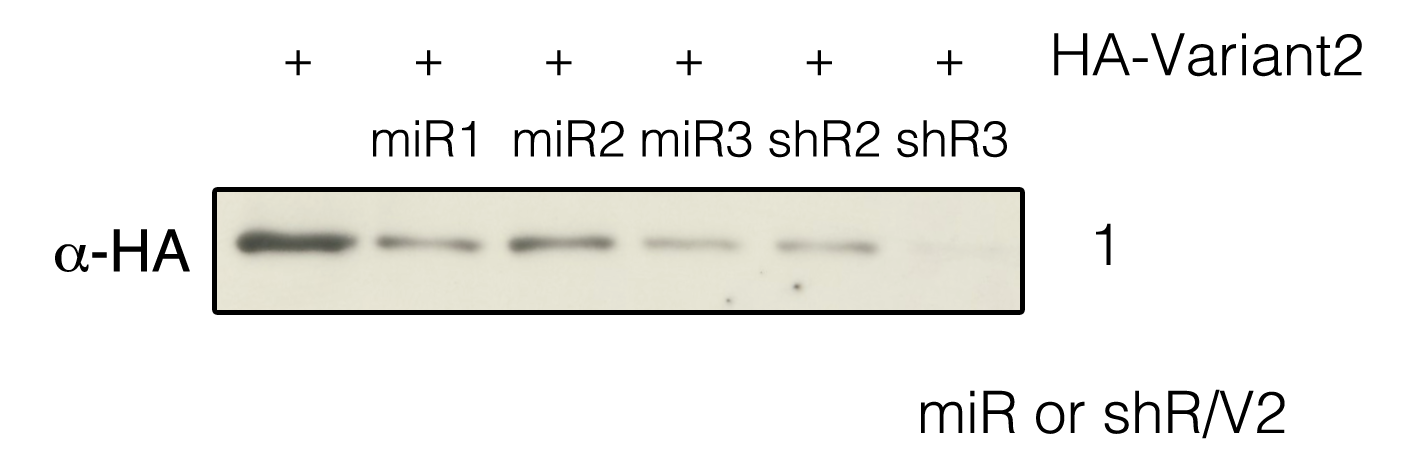
<style>
.page{position:relative;width:1417px;height:472px;background:#ffffff}
.page>*{position:absolute;margin:0}
.t1{font:50px "Helvetica-Light";color:#000000}
.t2{font:58.3px "Helvetica-Light";color:#000000}
.t3{font:58.3px "Helvetica";color:#000000}
.t4{font:58.3px "Symbol";color:#000000}
</style>
<div class="page">
<p class="t1" style="left:285px;top:33px;width:1077px;height:44px">+       +       +       +       +       +      <span class="t2">HA-Variant2</span></p>
<p class="t1" style="left:373px;top:120px;width:634px;height:38px">miR1  miR2 miR3 shR2 shR3</p>
<p class="t3" style="left:55px;top:229px;width:135px;height:43px"><span class="t4">a</span>-HA</p>
<p class="t2" style="left:1096px;top:223px;width:15px;height:42px">1</p>
<p class="t2" style="left:921px;top:389px;width:364px;height:50px">miR or shR/V2</p>
</div>
